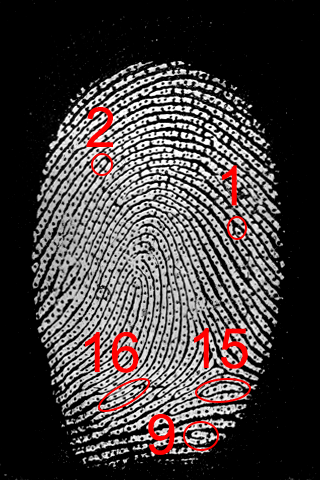
<style>
.page{position:relative;width:320px;height:480px;background:#000000}
.page>*{position:absolute;margin:0}
.t1{font:55.6px "ArialMT";color:#ff0000}
</style>
<div class="page">
<p class="t1" style="left:86px;top:107px;width:27px;height:40px">2</p>
<p class="t1" style="left:222px;top:165px;width:15px;height:41px">1</p>
<p class="t1" style="left:194px;top:328px;width:54px;height:41px">15</p>
<p class="t1" style="left:85px;top:332px;width:54px;height:41px">16</p>
<p class="t1" style="left:148px;top:414px;width:27px;height:41px">9</p>
</div>
